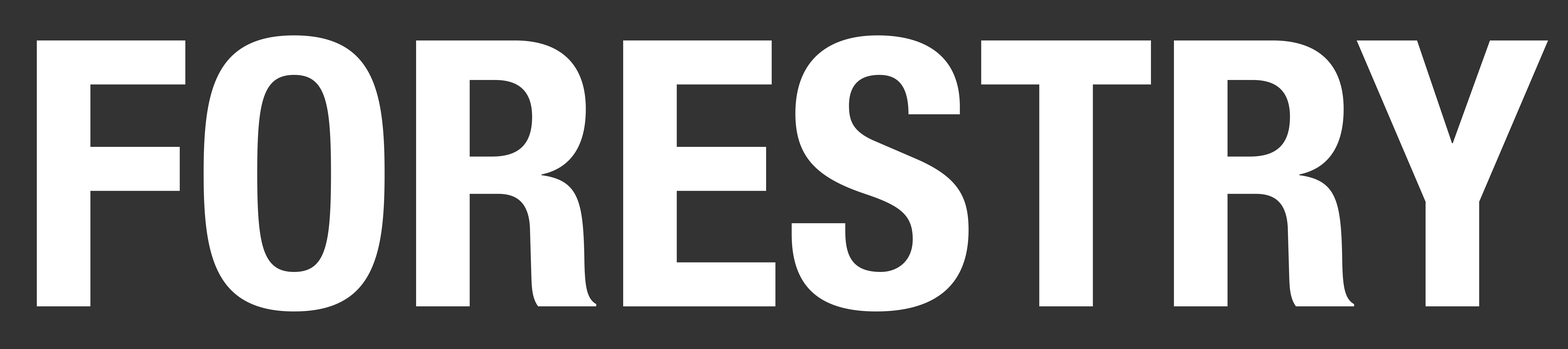
<style>
.page{position:relative;width:1568px;height:349px;background:#333333}
.page>*{position:absolute;margin:0}
.t1{font:372.3px "HelveticaNeueLTPro-BdCn";color:#ffffff}
</style>
<div class="page">
<p class="t1" style="left:37px;top:35px;width:1511px;height:276px">FORESTRY</p>
</div>
